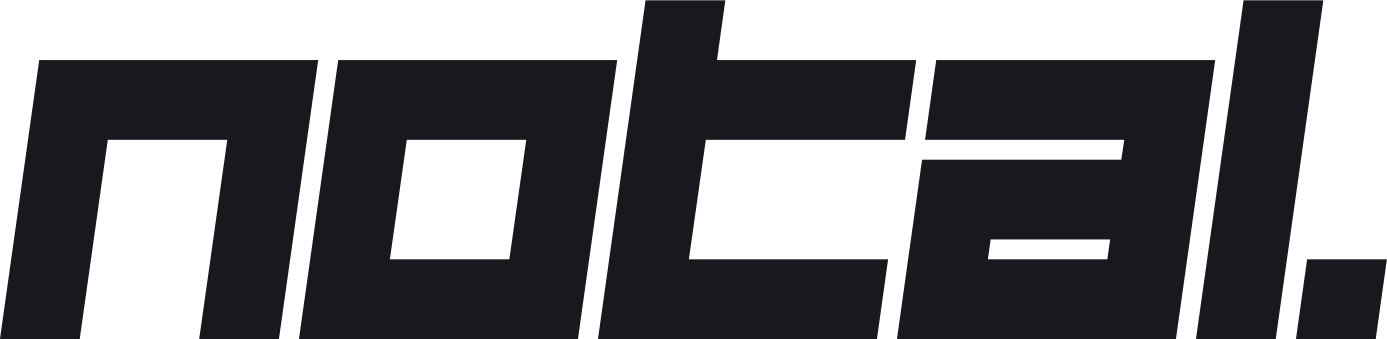
<style>
.page{position:relative;width:1387px;height:339px;background:#19181e}
.page>*{position:absolute;margin:0}
.t1{font:408.4px "CorporationGames";color:#19181e}
</style>
<div class="page">
<p class="t1" style="left:0px;top:0px;width:1387px;height:339px">notal.</p>
</div>
